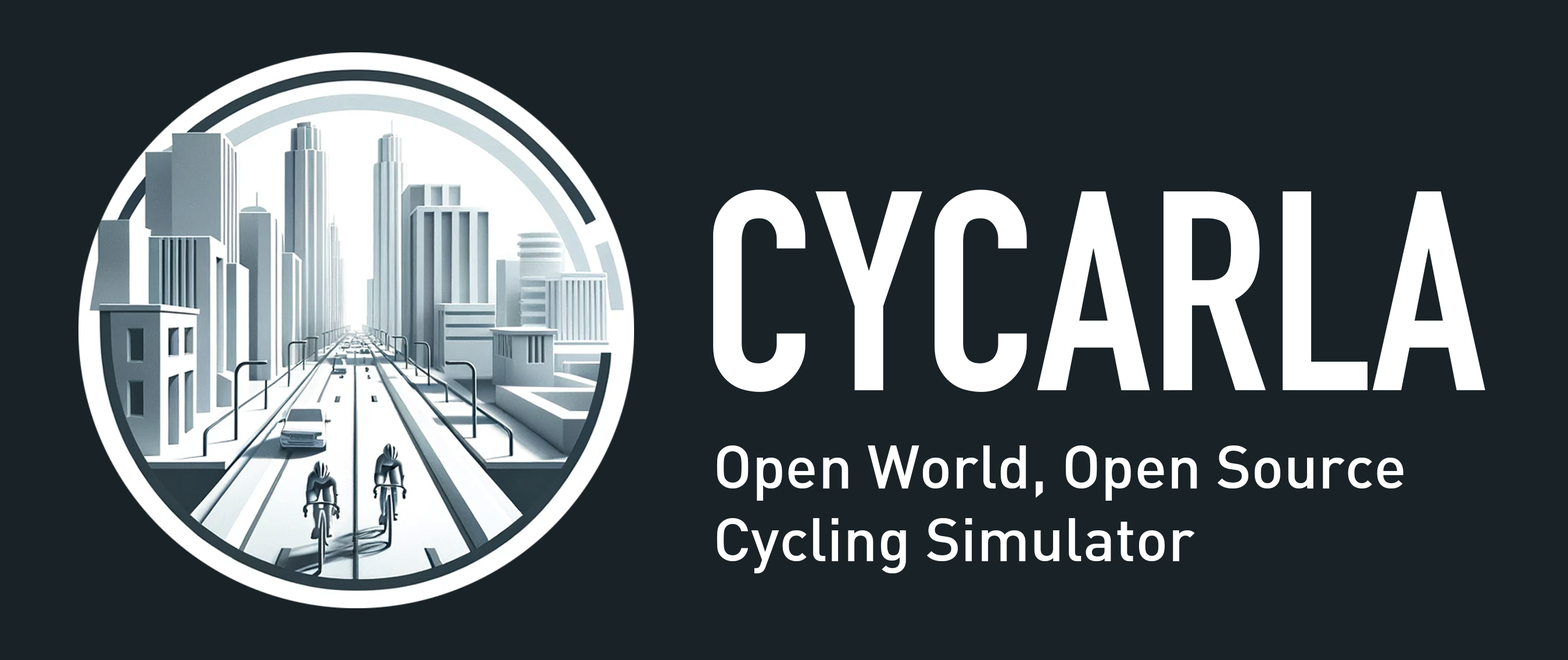
<style>
.page{position:relative;width:1568px;height:660px;background:#192226}
.page>*{position:absolute;margin:0}
.t1{font:279px "DINCondensed-Bold";color:#ffffff}
.t2{font:60.4px "DIN-Medium";color:#ffffff}
</style>
<div class="page">
<p class="t1" style="left:713px;top:189px;width:772px;height:203px">CYCARLA</p>
<p class="t2" style="left:717px;top:445px;width:687px;height:128px">Open World, Open Source<br>Cycling Simulator</p>
</div>
